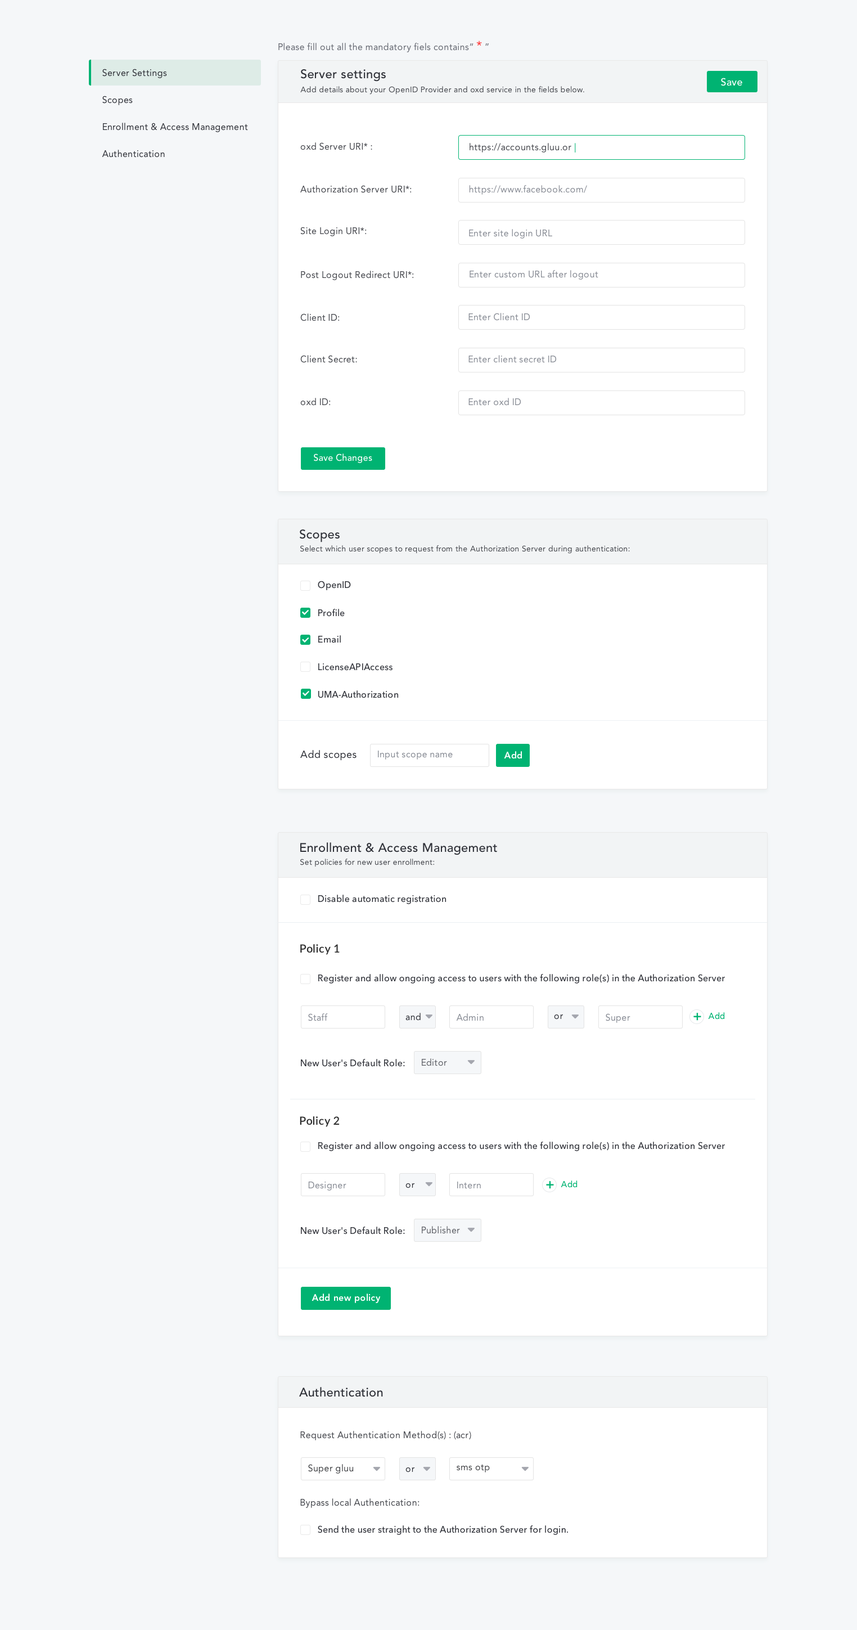
<style>
.page{position:relative;width:857px;height:1630px;background:#f5f7f9}
.page>*{position:absolute;margin:0}
.t1{font:9px "Avenir-Roman";letter-spacing:0.02em;color:#656871}
.t2{font:12.9px "Avenir-Roman";letter-spacing:0.02em;color:#ff3939}
.t3{font:9px/27px "Avenir-Roman";letter-spacing:0.02em;color:#2d2f36}
.t4{font:12.4px "Avenir-Medium";letter-spacing:0.02em;color:#2d2f36}
.t5{font:10.1px "Avenir-Medium";letter-spacing:0.02em;color:#ffffff}
.t6{font:7.9px "Avenir-Roman";letter-spacing:0.02em;color:#43454b}
.t7{font:9px "Avenir-Roman";letter-spacing:0.02em;color:#43454b}
.t8{font:9px "Avenir-Roman";letter-spacing:0.02em;color:#00b372}
.t9{font:9px "Avenir-Roman";letter-spacing:0.02em;color:#858992}
.t10{font:9px "Avenir-Medium";letter-spacing:0.02em;color:#ffffff}
.t11{font:9px "AvenirNext-Medium";letter-spacing:0.02em;color:#2d2f36}
.t12{font:10.1px "Avenir-Roman";letter-spacing:0.02em;color:#2d2f36}
.t13{font:9px "Avenir-Heavy";letter-spacing:0.02em;color:#ffffff}
.t14{font:11.2px "Lato-Semibold";letter-spacing:0.02em;color:#2e2e2e}
.t15{font:9px "Avenir-Roman";letter-spacing:0.02em;color:#2d2f36}
.t16{font:13.5px "Avenir-Heavy";letter-spacing:0.02em;color:#00b372}
.t17{font:8.4px "Avenir-Medium";letter-spacing:0.02em;color:#00b372}
.t18{font:9px "Avenir-Roman";letter-spacing:0.02em;color:#5d5f65}
.t19{font:9px "Avenir-Roman";letter-spacing:0.02em;color:#404144}
</style>
<div class="page">
<p class="t1" style="left:278px;top:40px;width:211px;height:12px">Please fill out all the mandatory fiels contains“ <span class="t2">*</span> ”</p>
<p class="t3" style="left:102px;top:69px;width:146px;height:89px">Server Settings<br>Scopes<br>Enrollment &amp; Access Management<br>Authentication</p>
<p class="t4" style="left:300px;top:69px;width:86px;height:13px">Server settings</p>
<p class="t5" style="left:721px;top:78px;width:21px;height:8px">Save</p>
<p class="t6" style="left:300px;top:86px;width:284px;height:8px">Add details about your OpenID Provider and oxd service in the fields below.</p>
<p class="t7" style="left:300px;top:142px;width:72px;height:8px">oxd Server URI* :</p>
<p class="t7" style="left:470px;top:143px;width:106px;height:9px">https://accounts.gluu.or <span class="t8">|</span></p>
<p class="t7" style="left:300px;top:185px;width:112px;height:8px">Authorization Server URI*:</p>
<p class="t9" style="left:469px;top:185px;width:118px;height:10px">https://www.facebook.com/</p>
<p class="t7" style="left:300px;top:227px;width:67px;height:9px">Site Login URI*:</p>
<p class="t9" style="left:469px;top:229px;width:83px;height:9px">Enter site login URL</p>
<p class="t9" style="left:470px;top:270px;width:128px;height:10px">Enter custom URL after logout</p>
<p class="t7" style="left:301px;top:271px;width:113px;height:9px">Post Logout Redirect URI*:</p>
<p class="t7" style="left:300px;top:313px;width:40px;height:8px">Client ID:</p>
<p class="t9" style="left:469px;top:313px;width:61px;height:8px">Enter Client ID</p>
<p class="t7" style="left:300px;top:355px;width:57px;height:8px">Client Secret:</p>
<p class="t9" style="left:469px;top:355px;width:88px;height:8px">Enter client secret ID</p>
<p class="t7" style="left:300px;top:398px;width:31px;height:8px">oxd ID:</p>
<p class="t9" style="left:469px;top:398px;width:52px;height:8px">Enter oxd ID</p>
<p class="t10" style="left:314px;top:453px;width:58px;height:10px">Save Changes</p>
<p class="t4" style="left:299px;top:529px;width:41px;height:13px">Scopes</p>
<p class="t6" style="left:300px;top:545px;width:330px;height:9px">Select which user scopes to request from the Authorization Server during authentication:</p>
<p class="t11" style="left:318px;top:580px;width:33px;height:10px">OpenID</p>
<p class="t11" style="left:318px;top:609px;width:27px;height:7px">Profile</p>
<p class="t11" style="left:318px;top:635px;width:23px;height:8px">Email</p>
<p class="t11" style="left:318px;top:663px;width:75px;height:7px">LicenseAPIAccess</p>
<p class="t11" style="left:318px;top:690px;width:81px;height:8px">UMA-Authorization</p>
<p class="t12" style="left:300px;top:750px;width:57px;height:10px">Add scopes</p>
<p class="t9" style="left:378px;top:750px;width:75px;height:9px">Input scope name</p>
<p class="t13" style="left:504px;top:751px;width:18px;height:8px">Add</p>
<p class="t4" style="left:300px;top:842px;width:197px;height:13px">Enrollment &amp; Access Management</p>
<p class="t6" style="left:300px;top:858px;width:134px;height:9px">Set policies for new user enrollment:</p>
<p class="t11" style="left:318px;top:894px;width:129px;height:10px">Disable automatic registration</p>
<p class="t14" style="left:300px;top:944px;width:40px;height:11px">Policy 1</p>
<p class="t11" style="left:318px;top:974px;width:407px;height:9px">Register and allow ongoing access to users with the following role(s) in the Authorization Server</p>
<p class="t9" style="left:308px;top:1013px;width:20px;height:8px">Staff</p>
<p class="t15" style="left:406px;top:1012px;width:15px;height:8px">and</p>
<p class="t9" style="left:456px;top:1013px;width:28px;height:8px">Admin</p>
<p class="t9" style="left:606px;top:1013px;width:25px;height:10px">Super</p>
<p class="t16" style="left:694px;top:1012px;width:7px;height:8px">+</p>
<p class="t17" style="left:708px;top:1012px;width:17px;height:7px">Add</p>
<p class="t15" style="left:554px;top:1014px;width:9px;height:5px">or</p>
<p class="t11" style="left:301px;top:1059px;width:104px;height:7px">New User's Default Role:</p>
<p class="t18" style="left:422px;top:1058px;width:25px;height:8px">Editor</p>
<p class="t14" style="left:300px;top:1116px;width:40px;height:11px">Policy 2</p>
<p class="t11" style="left:318px;top:1141px;width:407px;height:10px">Register and allow ongoing access to users with the following role(s) in the Authorization Server</p>
<p class="t9" style="left:308px;top:1181px;width:38px;height:9px">Designer</p>
<p class="t9" style="left:457px;top:1181px;width:24px;height:8px">Intern</p>
<p class="t16" style="left:546px;top:1181px;width:8px;height:8px">+</p>
<p class="t17" style="left:561px;top:1180px;width:17px;height:7px">Add</p>
<p class="t15" style="left:406px;top:1183px;width:9px;height:5px">or</p>
<p class="t11" style="left:301px;top:1226px;width:104px;height:8px">New User's Default Role:</p>
<p class="t18" style="left:422px;top:1226px;width:38px;height:8px">Publisher</p>
<p class="t13" style="left:312px;top:1293px;width:69px;height:10px">Add new policy</p>
<p class="t4" style="left:299px;top:1387px;width:84px;height:10px">Authentication</p>
<p class="t7" style="left:300px;top:1430px;width:171px;height:10px">Request Authentication Method(s) : (acr)</p>
<p class="t19" style="left:308px;top:1464px;width:46px;height:9px">Super gluu</p>
<p class="t15" style="left:406px;top:1467px;width:9px;height:5px">or</p>
<p class="t19" style="left:457px;top:1464px;width:33px;height:8px">sms otp</p>
<p class="t7" style="left:300px;top:1498px;width:120px;height:10px">Bypass local Authentication:</p>
<p class="t11" style="left:318px;top:1525px;width:250px;height:9px">Send the user straight to the Authorization Server for login.</p>
</div>
